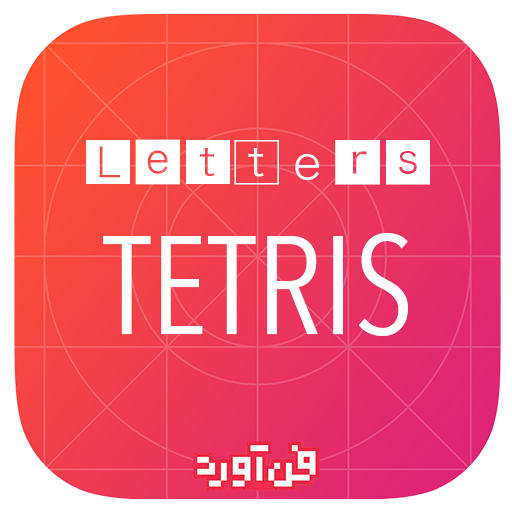
<style>
.page{position:relative;width:512px;height:512px;background:#ffffff}
.page>*{position:absolute;margin:0}
.t1{font:49.6px "HiraginoSans-W2";color:#ffffff}
.t2{font:138.6px "AvenirNextCondensed-Regular";color:#ffffff}
.t3{font:50.4px "HiraginoSans-W2";color:#ffffff}
</style>
<div class="page">
<p class="t1" style="left:86px;top:139px;width:344px;height:46px">Lett e rs</p>
<p class="t2" style="left:103px;top:233px;width:305px;height:103px"><span class="t3"><br></span>TETRIS</p>
</div>
